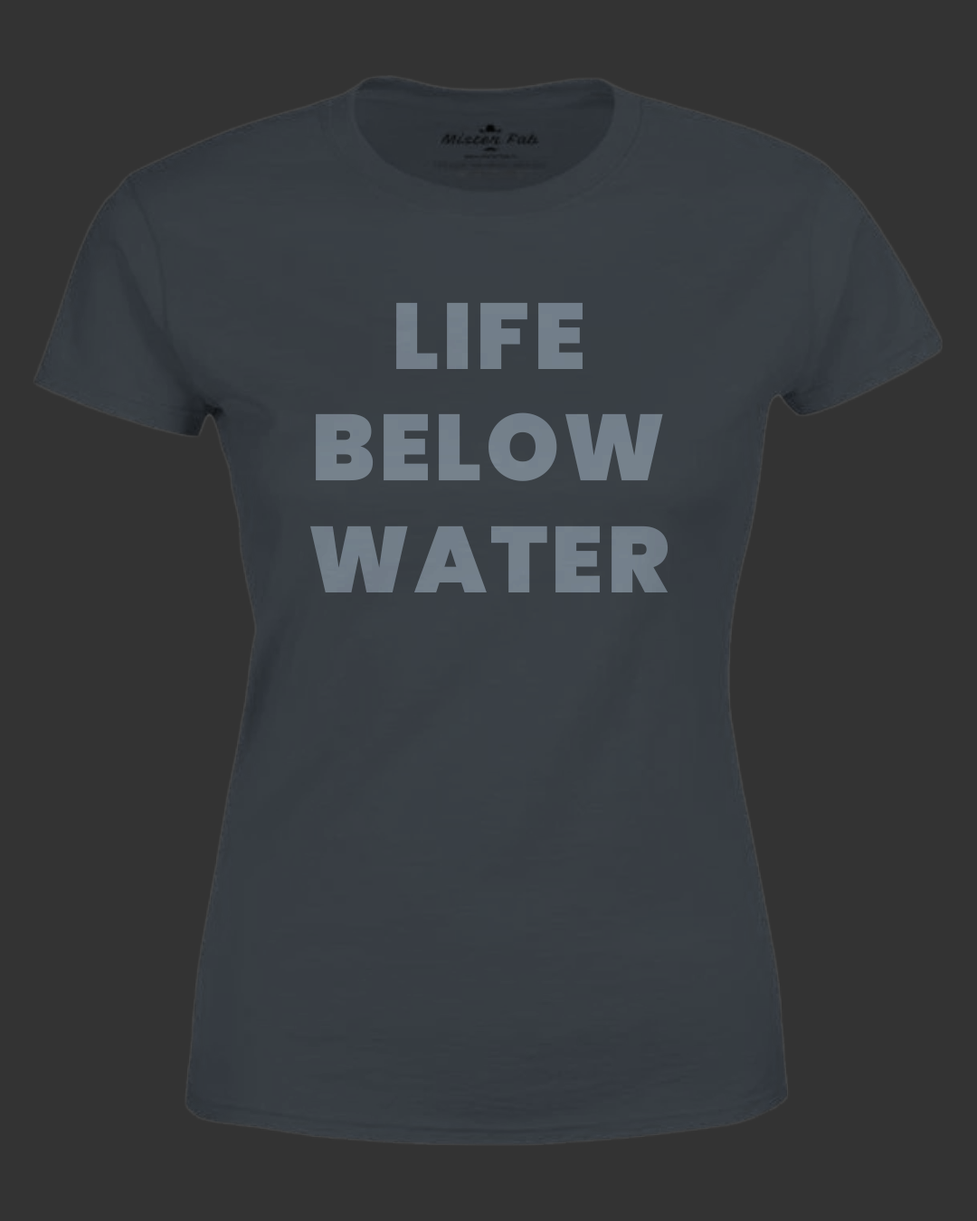
<style>
.page{position:relative;width:977px;height:1221px;background:#333333}
.page>*{position:absolute;margin:0}
.t1{font:93.4px "Poppins-Black";letter-spacing:0.04em;color:#74808a;text-transform:uppercase}
</style>
<div class="page">
<p class="t1" style="left:310px;top:302px;width:358px;height:290px;text-align:center">LIFE<br>BELOW<br>WATER</p>
</div>
